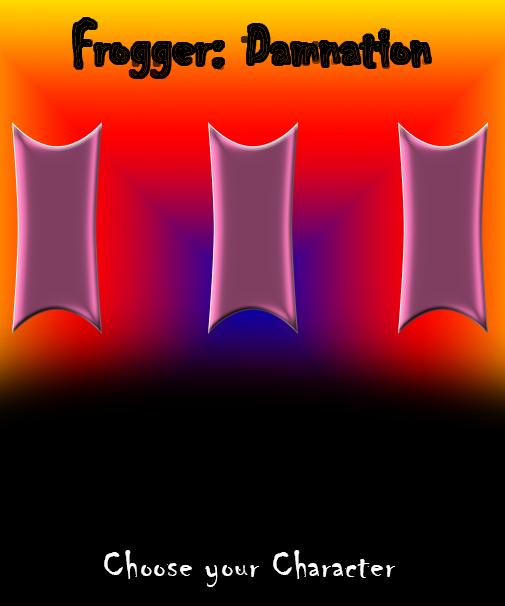
<style>
.page{position:relative;width:505px;height:606px;background:#000000}
.page>*{position:absolute;margin:0}
.t1{font:60px "Chiller-Regular";letter-spacing:0.024em;color:#000000}
.t2{font:40px "Chiller-Regular";letter-spacing:0.024em;color:#ffffff}
</style>
<div class="page">
<p class="t1" style="left:75px;top:20px;width:354px;height:56px">Frogger: Damnation</p>
<p class="t2" style="left:104px;top:550px;width:291px;height:37px">Choose your Character</p>
</div>
